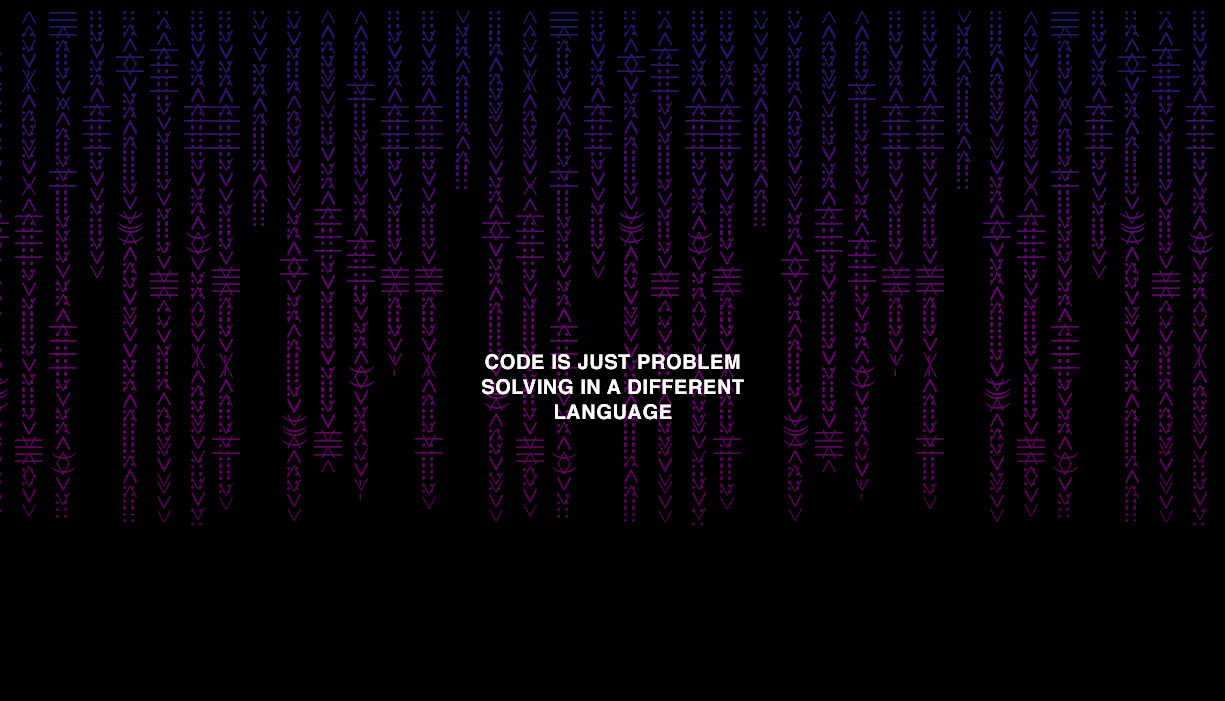
<style>
.page{position:relative;width:1225px;height:701px;background:#000000}
.page>*{position:absolute;margin:0}
.t1{font:20px/25px "Helvetica-Bold";letter-spacing:0.03em;color:#fcf8f8}
</style>
<div class="page">
<p class="t1" style="left:482px;top:354px;width:262px;height:66px;text-align:center">CODE IS JUST PROBLEM SOLVING IN A DIFFERENT LANGUAGE</p>
</div>
